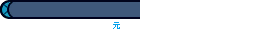
<style>
.page{position:relative;width:256px;height:32px;background:#ffffff}
.page>*{position:absolute;margin:0}
.t1{font:8px "Zfull-GB";letter-spacing:0.08em;color:#05a1ec}
</style>
<div class="page">
<p class="t1" style="left:113px;top:22px;width:7px;height:7px">元</p>
</div>
